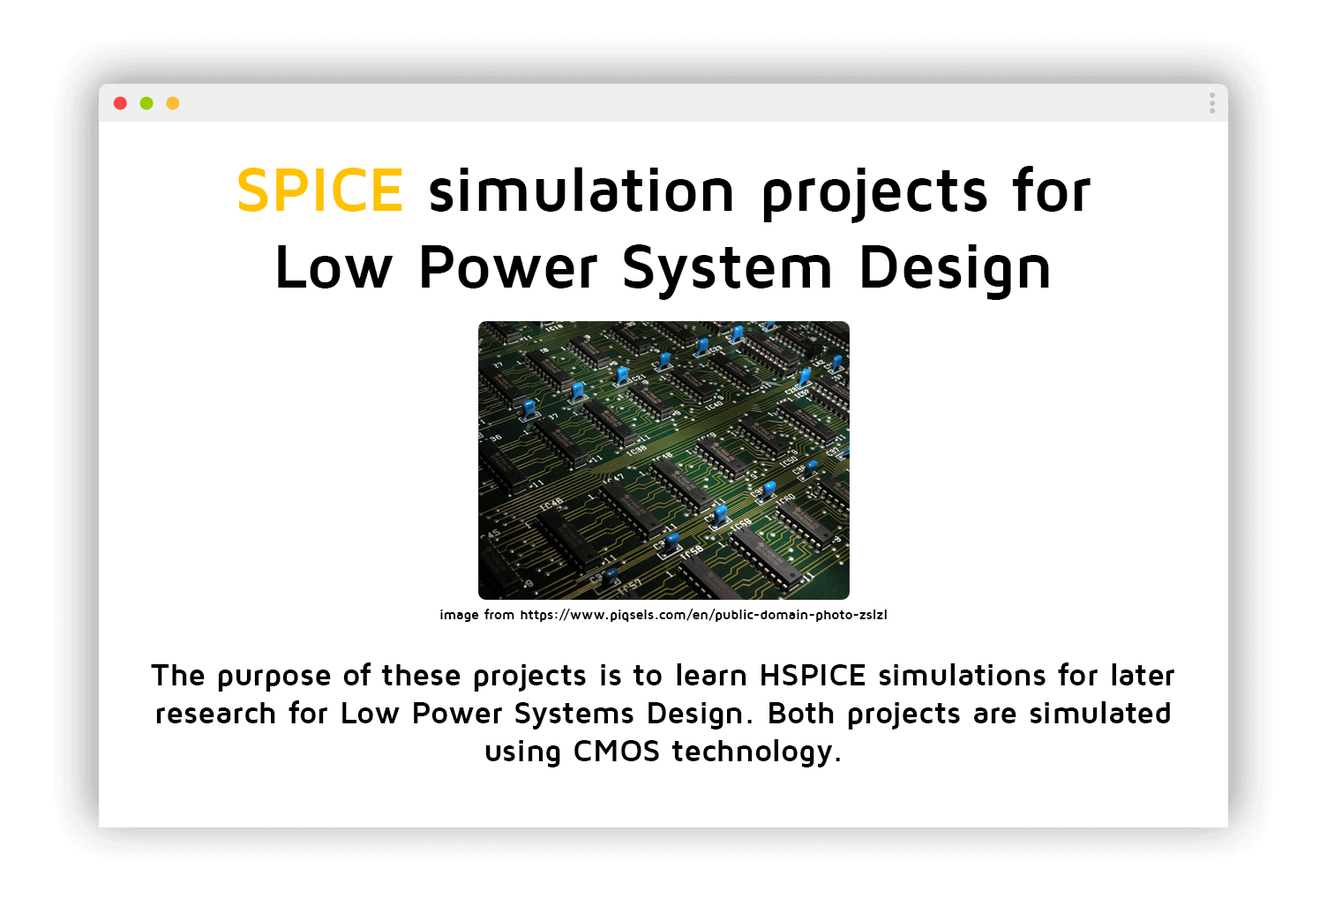
<style>
.page{position:relative;width:1327px;height:898px;background:#ffffff}
.page>*{position:absolute;margin:0}
.t1{font:63.5px "MavenProBold";color:#000000}
.t2{font:63.5px "MavenProBold";color:#ffc200}
.t3{font:14.1px "MavenProBold";color:#000000}
.t4{font:31.8px "MavenProBold";color:#000000}
</style>
<div class="page">
<p class="t1" style="left:238px;top:166px;width:853px;height:134px;text-align:center"><span class="t2">SPICE </span>simulation projects for Low Power System Design</p>
<p class="t3" style="left:440px;top:608px;width:447px;height:14px">image from https://www.piqsels.com/en/public-domain-photo-zslzl</p>
<p class="t4" style="left:151px;top:663px;width:1024px;height:105px;text-align:center">The purpose of these projects is to learn HSPICE simulations for later research for Low Power Systems Design. Both projects are simulated using CMOS technology.</p>
</div>
